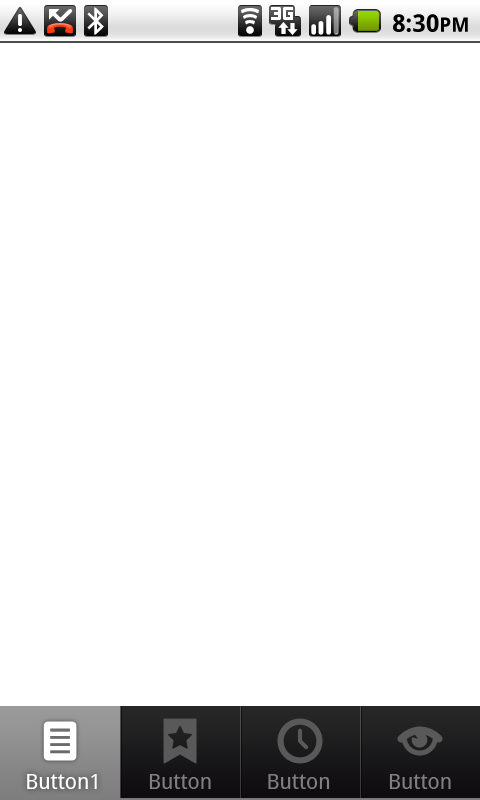
<style>
.page{position:relative;width:480px;height:800px;background:#ffffff}
.page>*{position:absolute;margin:0}
.t1{font:24px "DroidSans-Bold";letter-spacing:0.005em;color:#000000}
.t2{font:20px "DroidSans-Bold";letter-spacing:0.005em;color:#000000}
.t3{font:21px "DroidSans";color:#ffffff}
.t4{font:21px "DroidSans";color:#808080}
</style>
<div class="page">
<p class="t1" style="left:393px;top:14px;width:75px;height:18px">8:30<span class="t2">PM</span></p>
<p class="t3" style="left:27px;top:774px;width:70px;height:15px">Button1</p>
<p class="t4" style="left:149px;top:774px;width:62px;height:15px">Button</p>
<p class="t4" style="left:268px;top:774px;width:62px;height:15px">Button</p>
<p class="t4" style="left:389px;top:774px;width:62px;height:15px">Button</p>
</div>
